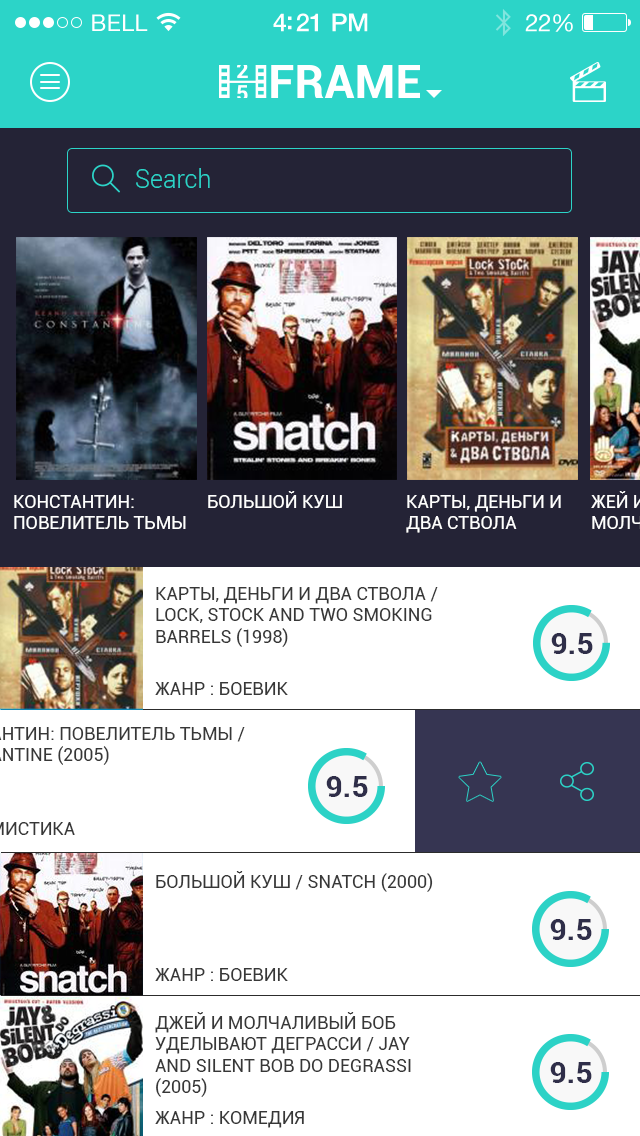
<style>
.page{position:relative;width:640px;height:1136px;background:#ffffff}
.page>*{position:absolute;margin:0}
.t1{font:25px "Roboto-Light";color:#2cd4c8}
.t2{font:18px "Roboto-Regular";color:#ffffff;text-transform:uppercase}
.t3{font:18px "Roboto-Regular";color:#fefefe;text-transform:uppercase}
.t4{font:18px "Roboto-Regular";color:#373737;text-transform:uppercase}
.t5{font:30px "Roboto-Bold";color:#2f2e49}
</style>
<div class="page">
<p class="t1" style="left:136px;top:168px;width:74px;height:20px">Search</p>
<p class="t2" style="left:14px;top:495px;width:172px;height:34px">Константин: Повелитель тьмы</p>
<p class="t3" style="left:208px;top:491px;width:134px;height:17px">Большой куш</p>
<p class="t2" style="left:406px;top:495px;width:155px;height:38px">Карты, деньги и два ствола</p>
<p class="t4" style="left:156px;top:587px;width:282px;height:60px">Карты, деньги и два ствола / Lock, Stock and Two Smoking Barrels (1998)</p>
<p class="t5" style="left:551px;top:633px;width:42px;height:21px">9.5</p>
<p class="t4" style="left:155px;top:682px;width:133px;height:13px">жанр : боевик</p>
<p class="t5" style="left:326px;top:776px;width:42px;height:21px">9.5</p>
<p class="t4" style="left:156px;top:871px;width:277px;height:21px">Большой куш / Snatch (2000)</p>
<p class="t5" style="left:550px;top:919px;width:42px;height:21px">9.5</p>
<p class="t4" style="left:155px;top:968px;width:133px;height:13px">жанр : Боевик</p>
<p class="t4" style="left:155px;top:1012px;width:256px;height:85px">Джей и молчаливый Боб уделывают Деграсси / Jay and Silent Bob Do Degrassi (2005)</p>
<p class="t5" style="left:550px;top:1062px;width:42px;height:21px">9.5</p>
<p class="t4" style="left:155px;top:1111px;width:149px;height:17px">жанр : Комедия</p>
</div>
